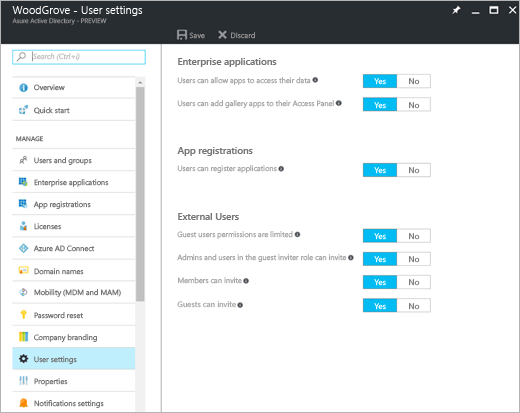
<style>
.page{position:relative;width:520px;height:413px;background:#ffffff}
.page>*{position:absolute;margin:0}
.t1{font:11.2px "SegoeUI-Semilight";color:#ffffff}
.t2{font:6.5px "SegoeUI-Semilight";color:#908e8e}
.t3{font:7.6px "SegoeUI";color:#908e8e}
.t4{font:7.5px "SegoeUI-Italic";color:#c3c3c3}
.t5{font:9.6px "SegoeUI-Semibold";color:#757575}
.t6{font:7.4px "SegoeUI";color:#a6a6a6}
.t7{font:8px "SegoeUI"}
.t8{font:8px "SegoeUI";color:#757575}
.t9{font:7.5px "SegoeUI";color:#757575}
.t10{font:6.5px "SegoeUI";color:#757575}
.t11{font:7.5px "SegoeUI";color:#a6a6a6}
.t12{font:7.9px "SegoeUI";color:#a6a6a6}
</style>
<div class="page">
<p class="t1" style="left:12px;top:6px;width:131px;height:10px">WoodGrove - User settings</p>
<p class="t2" style="left:12px;top:18px;width:95px;height:7px">Asure Active Directory - PREVIEW</p>
<p class="t3" style="left:189px;top:32px;width:16px;height:7px">Save</p>
<p class="t3" style="left:231px;top:32px;width:24px;height:7px">DIscard</p>
<p class="t4" style="left:33px;top:53px;width:47px;height:8px">Search (Ctrl+i)</p>
<p class="t5" style="left:178px;top:58px;width:99px;height:9px">Enterprise applications</p>
<p class="t6" style="left:177px;top:77px;width:134px;height:8px">Users can allow apps to access their data</p>
<p class="t7" style="left:374px;top:78px;width:12px;height:7px">Yes</p>
<p class="t8" style="left:409px;top:78px;width:11px;height:7px">No</p>
<p class="t9" style="left:34px;top:84px;width:31px;height:7px">Overview</p>
<p class="t6" style="left:177px;top:100px;width:157px;height:8px">Users can add gallery apps to their Access Panel</p>
<p class="t7" style="left:374px;top:102px;width:12px;height:7px">Yes</p>
<p class="t8" style="left:409px;top:102px;width:11px;height:7px">No</p>
<p class="t9" style="left:34px;top:107px;width:36px;height:7px">Quick start</p>
<p class="t10" style="left:16px;top:136px;width:27px;height:6px">MANAGE</p>
<p class="t5" style="left:177px;top:147px;width:76px;height:9px">App registrations</p>
<p class="t9" style="left:34px;top:157px;width:58px;height:8px">Users and groups</p>
<p class="t6" style="left:177px;top:165px;width:100px;height:8px">Users can register applications</p>
<p class="t7" style="left:374px;top:167px;width:12px;height:7px">Yes</p>
<p class="t8" style="left:409px;top:167px;width:11px;height:7px">No</p>
<p class="t9" style="left:34px;top:179px;width:75px;height:8px">Enterprise applications</p>
<p class="t9" style="left:34px;top:201px;width:57px;height:8px">App registrations</p>
<p class="t5" style="left:178px;top:213px;width:61px;height:7px">External Users</p>
<p class="t9" style="left:34px;top:223px;width:27px;height:7px">Licenses</p>
<p class="t6" style="left:177px;top:231px;width:116px;height:8px">Guest users permissions are limited</p>
<p class="t7" style="left:374px;top:233px;width:12px;height:7px">Yes</p>
<p class="t8" style="left:409px;top:233px;width:11px;height:7px">No</p>
<p class="t9" style="left:34px;top:245px;width:61px;height:7px">Azure AD Connect</p>
<p class="t6" style="left:177px;top:254px;width:170px;height:8px">Admins and users in the guest inviter role can invite</p>
<p class="t7" style="left:374px;top:256px;width:12px;height:7px">Yes</p>
<p class="t8" style="left:409px;top:256px;width:11px;height:7px">No</p>
<p class="t9" style="left:34px;top:268px;width:50px;height:7px">Domain names</p>
<p class="t11" style="left:178px;top:277px;width:64px;height:7px">Members can invite</p>
<p class="t7" style="left:374px;top:279px;width:12px;height:7px">Yes</p>
<p class="t8" style="left:409px;top:279px;width:11px;height:7px">No</p>
<p class="t9" style="left:34px;top:289px;width:87px;height:8px">Mobility (MDM and MAM)</p>
<p class="t12" style="left:177px;top:301px;width:59px;height:7px">Guests can invite</p>
<p class="t7" style="left:374px;top:303px;width:12px;height:7px">Yes</p>
<p class="t8" style="left:409px;top:303px;width:11px;height:7px">No</p>
<p class="t9" style="left:34px;top:312px;width:49px;height:7px">Password reset</p>
<p class="t9" style="left:34px;top:334px;width:63px;height:8px">Company branding</p>
<p class="t9" style="left:34px;top:356px;width:43px;height:8px">User settings</p>
<p class="t9" style="left:34px;top:378px;width:34px;height:8px">Properties</p>
<p class="t9" style="left:34px;top:400px;width:70px;height:8px">Notifications settings</p>
</div>
